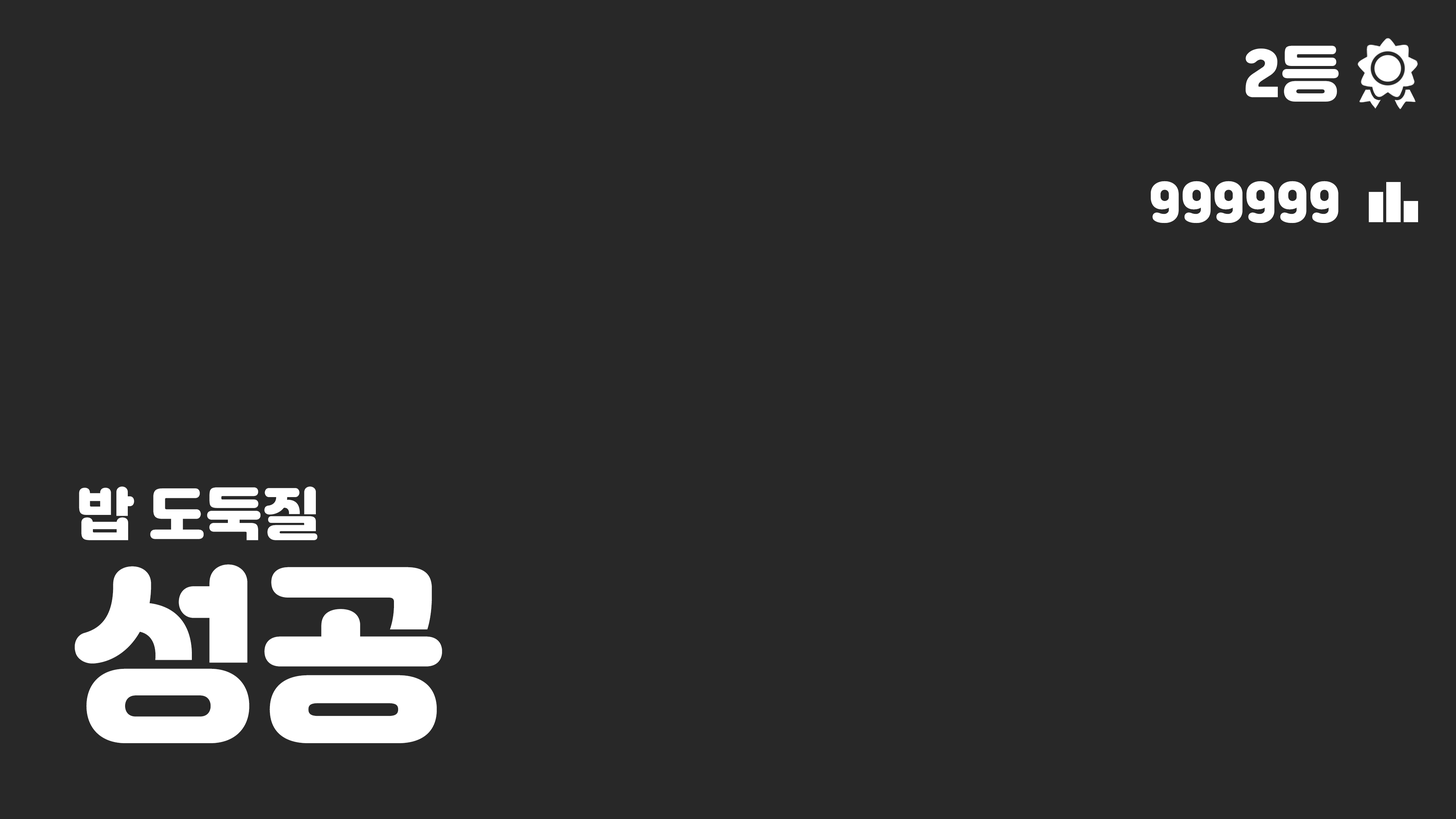
<style>
.page{position:relative;width:1456px;height:819px;background:#282828}
.page>*{position:absolute;margin:0}
.t1{font:60px "JalnanOTF";color:#ffffff}
.t2{font:50.5px "JalnanOTF";color:#ffffff}
.t3{font:56.9px "JalnanOTF";color:#ffffff}
.t4{font:189.6px "JalnanOTF";color:#ffffff}
</style>
<div class="page">
<p class="t1" style="left:1246px;top:45px;width:93px;height:57px">2등</p>
<p class="t2" style="left:1151px;top:181px;width:187px;height:42px">999999</p>
<p class="t3" style="left:79px;top:486px;width:238px;height:54px">밥 도둑질</p>
<p class="t4" style="left:75px;top:564px;width:367px;height:179px">성공</p>
</div>
